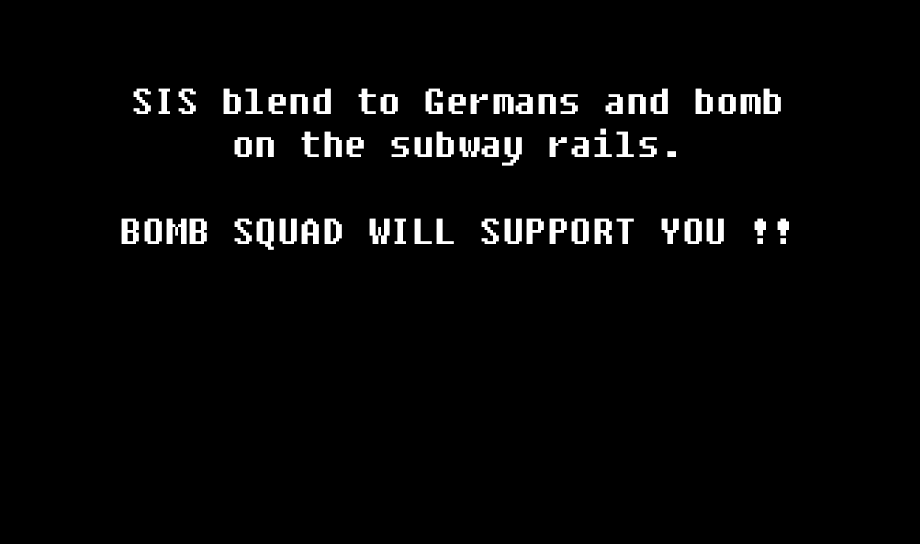
<style>
.page{position:relative;width:920px;height:544px;background:#000000}
.page>*{position:absolute;margin:0}
.t1{font:36px "Fixedsys";color:#ffffff}
</style>
<div class="page">
<p class="t1" style="left:121px;top:88px;width:668px;height:162px;text-align:center">SIS blend to Germans and bomb<br>on the subway rails.<br> <br>BOMB SQUAD WILL SUPPORT YOU !!</p>
</div>
